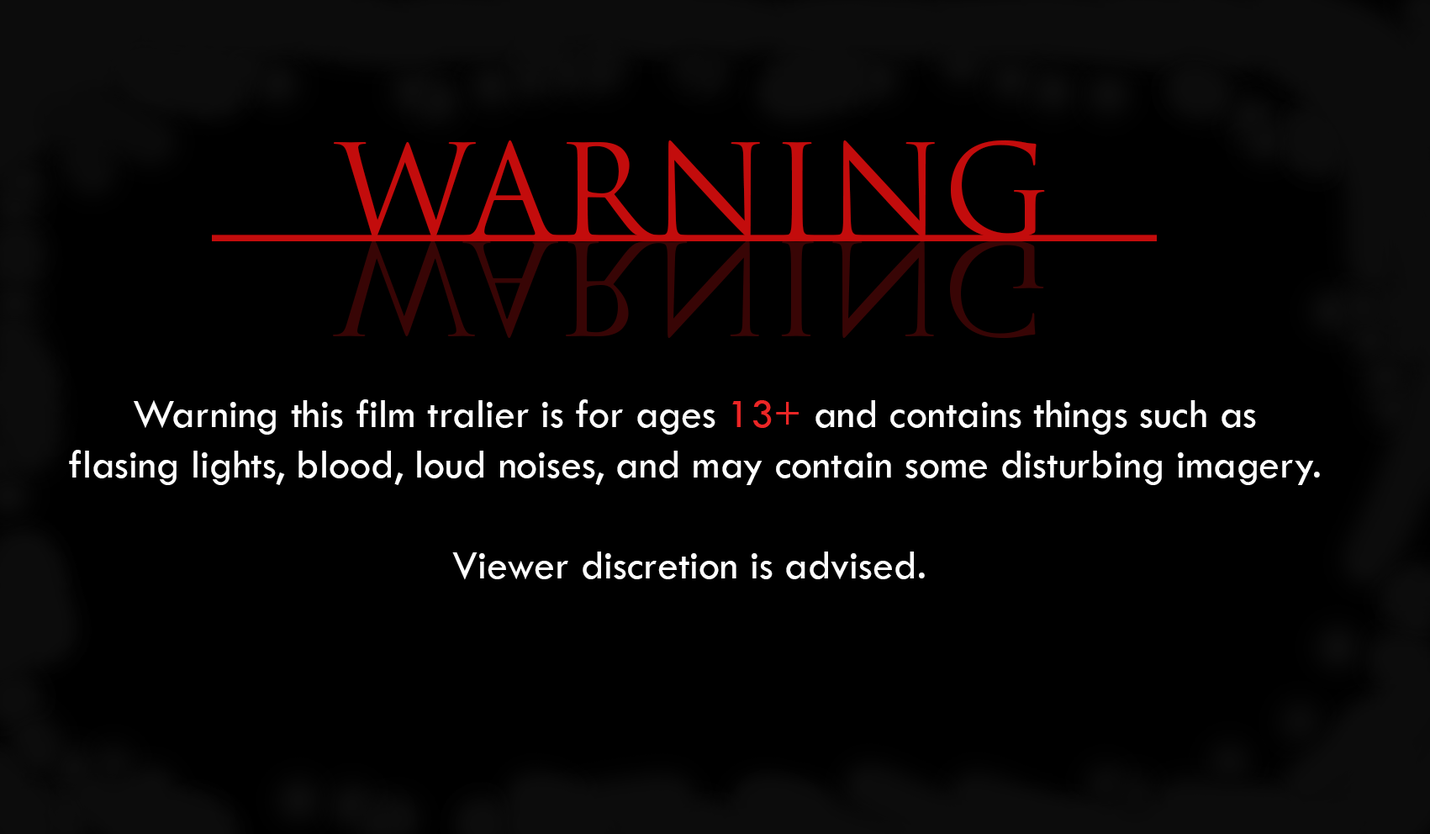
<style>
.page{position:relative;width:1430px;height:834px;background:#000000}
.page>*{position:absolute;margin:0}
.t1{font:126.1px "TrajanPro-Regular";color:#c30c0c}
.t2{font:42px "TwCenMT-Regular";color:#fefefe}
.t3{font:42px "TwCenMT-Regular";color:#eb2626}
</style>
<div class="page">
<p class="t1" style="left:334px;top:140px;width:711px;height:99px">WARNING</p>
<p class="t1" style="left:212px;top:235px;width:945px;height:6px">_______________</p>
<p class="t2" style="left:69px;top:399px;width:1251px;height:181px;text-align:center">Warning this film tralier is for ages <span class="t3">13+</span> and contains things such as<br>flasing lights, blood, loud noises, and may contain some disturbing imagery.<br><br>Viewer discretion is advised.</p>
</div>
